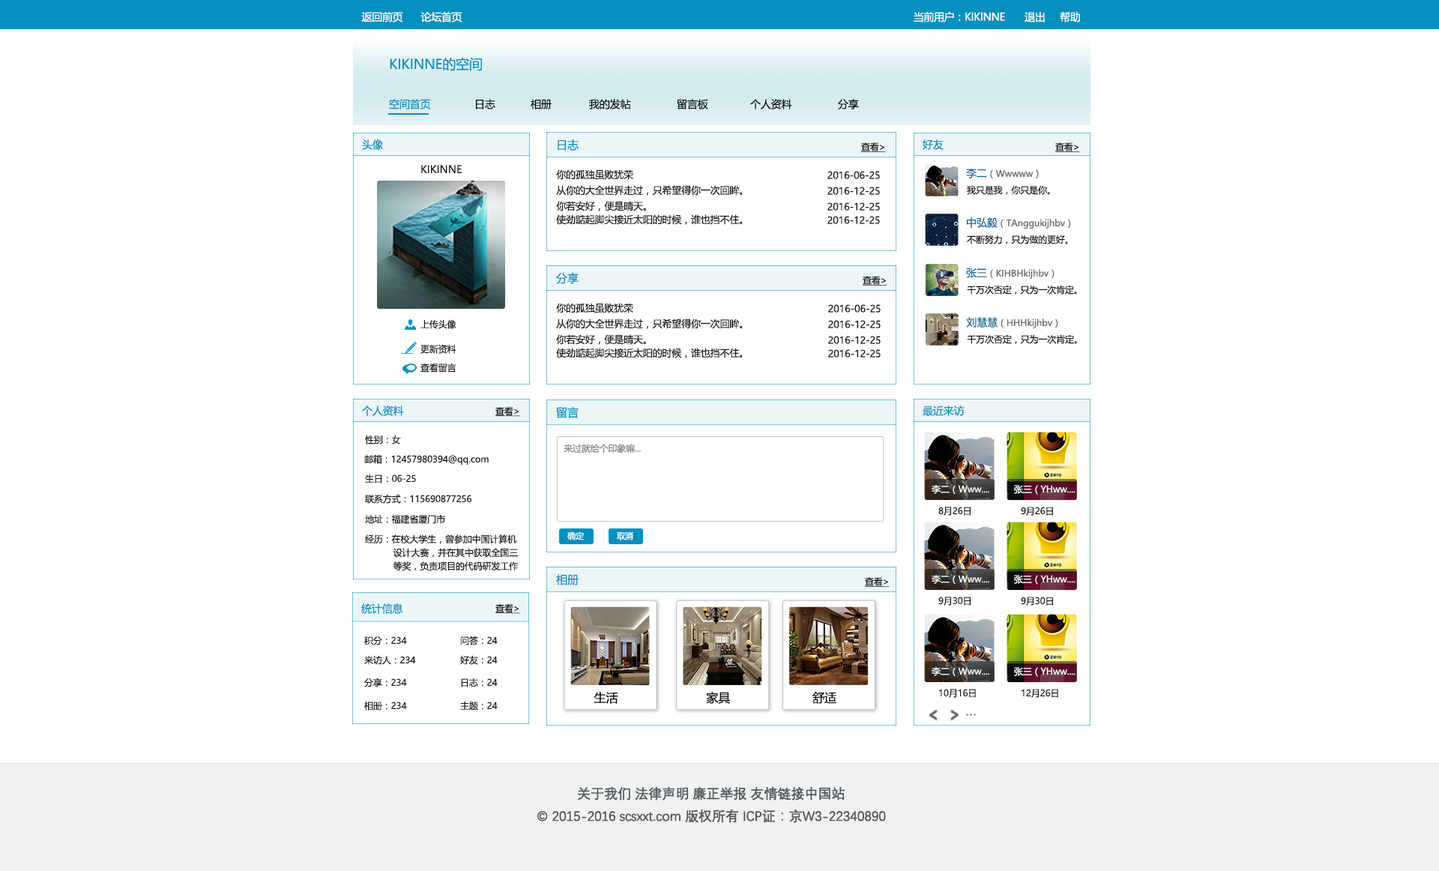
<style>
.page{position:relative;width:1439px;height:871px;background:#ffffff}
.page>*{position:absolute;margin:0}
.t1{font:10.5px "MicrosoftYaHei";letter-spacing:-0.025em;color:#ffffff}
.t2{font:13.5px "MicrosoftYaHei";letter-spacing:-0.01em;color:#0390bf}
.t3{font:10.5px "MicrosoftYaHei";letter-spacing:-0.01em;color:#0390bf}
.t4{font:10.5px "MicrosoftYaHei";letter-spacing:-0.01em;color:#040404}
.t5{font:11.4px "MicrosoftYaHei";letter-spacing:-0.01em;color:#0390bf}
.t6{font:9px "MicrosoftYaHei";letter-spacing:-0.01em;color:#0c0d0e;text-decoration:underline}
.t7{font:10.5px "MicrosoftYaHei";letter-spacing:-0.01em;color:#131616}
.t8{font:9.8px "MicrosoftYaHei";letter-spacing:-0.01em;color:#131616}
.t9{font:9px "MicrosoftYaHei";letter-spacing:-0.01em;color:#656666}
.t10{font:10.5px "MicrosoftYaHei";letter-spacing:-0.01em;color:#056894}
.t11{font:9px "MicrosoftYaHei";letter-spacing:-0.01em;color:#0f0f0f}
.t12{font:9px "MicrosoftYaHei";letter-spacing:-0.01em;color:#131616}
.t13{font:9px "MicrosoftYaHei";letter-spacing:-0.01em;color:#818484}
.t14{font:9px "MicrosoftYaHei";letter-spacing:-0.01em;color:#f4fcfe}
.t15{font:9px "MicrosoftYaHei";letter-spacing:-0.01em;color:#111212}
.t16{font:8.3px "MicrosoftYaHei";letter-spacing:-0.01em;color:#ffffff}
.t17{font:9px/13.5px "MicrosoftYaHei";letter-spacing:-0.01em;color:#131616}
.t18{font:12.1px "MicrosoftYaHei";letter-spacing:-0.01em;color:#040505}
.t19{font:18.4px "MicrosoftYaHei";letter-spacing:-0.01em;color:#616363;scale:0.78 1}
.t20{font:18.2px "MicrosoftYaHei";letter-spacing:-0.01em;color:#616363;scale:0.79 1}
.t21{font:13.5px/22.5px "DengXian-Regular";letter-spacing:-0.025em;color:#545a5c;font-weight:bold}
</style>
<div class="page">
<p class="t1" style="left:361px;top:11px;width:42px;height:11px">返回前页</p>
<p class="t1" style="left:420px;top:11px;width:42px;height:11px">论坛首页</p>
<p class="t1" style="left:913px;top:11px;width:92px;height:11px">当前用户：KIKINNE</p>
<p class="t1" style="left:1024px;top:12px;width:21px;height:10px">退出</p>
<p class="t1" style="left:1060px;top:11px;width:20px;height:11px">帮助</p>
<p class="t2" style="left:390px;top:57px;width:92px;height:14px">KIKINNE的空间</p>
<p class="t3" style="left:389px;top:99px;width:42px;height:10px">空间首页</p>
<p class="t4" style="left:476px;top:99px;width:19px;height:10px">日志</p>
<p class="t4" style="left:531px;top:99px;width:20px;height:10px">相册</p>
<p class="t4" style="left:589px;top:99px;width:42px;height:10px">我的发帖</p>
<p class="t4" style="left:677px;top:99px;width:31px;height:10px">留言板</p>
<p class="t4" style="left:750px;top:99px;width:42px;height:10px">个人资料</p>
<p class="t4" style="left:838px;top:99px;width:21px;height:10px">分享</p>
<p class="t3" style="left:362px;top:139px;width:21px;height:11px">头像</p>
<p class="t5" style="left:557px;top:139px;width:21px;height:12px">日志</p>
<p class="t6" style="left:861px;top:142px;width:25px;height:10px">查看&gt;</p>
<p class="t3" style="left:922px;top:139px;width:21px;height:11px">好友</p>
<p class="t6" style="left:1055px;top:142px;width:25px;height:10px">查看&gt;</p>
<p class="t7" style="left:421px;top:165px;width:41px;height:8px">KIKINNE</p>
<p class="t8" style="left:556px;top:169px;width:77px;height:11px">你的孤独虽败犹荣</p>
<p class="t8" style="left:827px;top:171px;width:53px;height:8px">2016-06-25</p>
<p class="t9" style="left:966px;top:168px;width:73px;height:10px"><span class="t10">李二</span>（Wwwww）</p>
<p class="t8" style="left:556px;top:185px;width:187px;height:11px">从你的大全世界走过，只希望得你一次回眸。</p>
<p class="t11" style="left:967px;top:185px;width:83px;height:10px">我只是我，你只是你。</p>
<p class="t8" style="left:827px;top:187px;width:53px;height:8px">2016-12-25</p>
<p class="t8" style="left:556px;top:201px;width:90px;height:10px">你若安好，便是晴天。</p>
<p class="t8" style="left:827px;top:202px;width:53px;height:9px">2016-12-25</p>
<p class="t8" style="left:556px;top:214px;width:187px;height:11px">使劲踮起脚尖接近太阳的时候，谁也挡不住。</p>
<p class="t8" style="left:827px;top:216px;width:53px;height:8px">2016-12-25</p>
<p class="t9" style="left:967px;top:217px;width:104px;height:12px"><span class="t10">中弘毅</span>（TAnggukijhbv）</p>
<p class="t11" style="left:967px;top:235px;width:101px;height:9px">不断努力，只为做的更好。</p>
<p class="t9" style="left:966px;top:268px;width:88px;height:11px"><span class="t10">张三</span>（KIHBHkijhbv）</p>
<p class="t5" style="left:556px;top:272px;width:22px;height:12px">分享</p>
<p class="t6" style="left:862px;top:276px;width:25px;height:9px">查看&gt;</p>
<p class="t11" style="left:967px;top:285px;width:110px;height:9px">千万次否定，只为一次肯定。</p>
<p class="t8" style="left:556px;top:303px;width:77px;height:10px">你的孤独虽败犹荣</p>
<p class="t8" style="left:828px;top:304px;width:52px;height:8px">2016-06-25</p>
<p class="t9" style="left:966px;top:317px;width:92px;height:11px"><span class="t10">刘慧慧</span>（HHHkijhbv）</p>
<p class="t12" style="left:420px;top:319px;width:36px;height:10px">上传头像</p>
<p class="t8" style="left:556px;top:318px;width:187px;height:11px">从你的大全世界走过，只希望得你一次回眸。</p>
<p class="t8" style="left:828px;top:320px;width:52px;height:8px">2016-12-25</p>
<p class="t8" style="left:556px;top:334px;width:90px;height:11px">你若安好，便是晴天。</p>
<p class="t8" style="left:828px;top:336px;width:52px;height:8px">2016-12-25</p>
<p class="t11" style="left:967px;top:334px;width:110px;height:10px">千万次否定，只为一次肯定。</p>
<p class="t12" style="left:420px;top:344px;width:36px;height:10px">更新资料</p>
<p class="t8" style="left:556px;top:348px;width:187px;height:10px">使劲踮起脚尖接近太阳的时候，谁也挡不住。</p>
<p class="t8" style="left:828px;top:349px;width:52px;height:8px">2016-12-25</p>
<p class="t12" style="left:420px;top:363px;width:36px;height:9px">查看留言</p>
<p class="t3" style="left:362px;top:405px;width:42px;height:11px">个人资料</p>
<p class="t6" style="left:495px;top:406px;width:25px;height:11px">查看&gt;</p>
<p class="t5" style="left:556px;top:406px;width:22px;height:12px">留言</p>
<p class="t3" style="left:922px;top:405px;width:42px;height:11px">最近来访</p>
<p class="t12" style="left:365px;top:435px;width:36px;height:9px">性别：女</p>
<p class="t13" style="left:563px;top:444px;width:78px;height:9px">来过就给个印象嘛...</p>
<p class="t12" style="left:364px;top:454px;width:125px;height:11px">邮箱：12457980394@qq.com</p>
<p class="t12" style="left:365px;top:474px;width:51px;height:9px">生日：06-25</p>
<p class="t14" style="left:931px;top:484px;width:58px;height:10px">李二（Www....</p>
<p class="t14" style="left:1014px;top:485px;width:61px;height:10px">张三（YHww....</p>
<p class="t12" style="left:365px;top:494px;width:107px;height:10px">联系方式：115690877256</p>
<p class="t15" style="left:938px;top:507px;width:32px;height:9px">8月26日</p>
<p class="t15" style="left:1021px;top:507px;width:32px;height:9px">9月26日</p>
<p class="t12" style="left:365px;top:514px;width:80px;height:10px">地址：福建省厦门市</p>
<p class="t16" style="left:567px;top:531px;width:17px;height:9px">确定</p>
<p class="t16" style="left:617px;top:531px;width:16px;height:9px">取消</p>
<p class="t17" style="left:365px;top:534px;width:153px;height:37px">经历：在校大学生，曾参加中国计算机<br>           设计大赛，并在其中获取全国三<br>           等奖，负责项目的代码研发工作。</p>
<p class="t5" style="left:556px;top:574px;width:22px;height:11px">相册</p>
<p class="t6" style="left:865px;top:577px;width:24px;height:10px">查看&gt;</p>
<p class="t14" style="left:931px;top:574px;width:58px;height:10px">李二（Www....</p>
<p class="t14" style="left:1014px;top:575px;width:61px;height:9px">张三（YHww....</p>
<p class="t3" style="left:361px;top:603px;width:42px;height:11px">统计信息</p>
<p class="t6" style="left:495px;top:603px;width:25px;height:11px">查看&gt;</p>
<p class="t15" style="left:938px;top:596px;width:32px;height:9px">9月30日</p>
<p class="t15" style="left:1021px;top:596px;width:32px;height:9px">9月30日</p>
<p class="t12" style="left:364px;top:635px;width:43px;height:10px">积分：234</p>
<p class="t12" style="left:460px;top:635px;width:38px;height:10px">问答：24</p>
<p class="t12" style="left:364px;top:655px;width:52px;height:10px">来访人：234</p>
<p class="t12" style="left:460px;top:655px;width:38px;height:10px">好友：24</p>
<p class="t12" style="left:364px;top:677px;width:43px;height:10px">分享：234</p>
<p class="t12" style="left:461px;top:677px;width:37px;height:10px">日志：24</p>
<p class="t14" style="left:931px;top:666px;width:58px;height:10px">李二（Www....</p>
<p class="t14" style="left:1014px;top:667px;width:61px;height:10px">张三（YHww....</p>
<p class="t15" style="left:939px;top:689px;width:37px;height:9px">10月16日</p>
<p class="t15" style="left:1021px;top:689px;width:37px;height:9px">12月26日</p>
<p class="t12" style="left:364px;top:701px;width:43px;height:9px">相册：234</p>
<p class="t12" style="left:460px;top:701px;width:38px;height:9px">主题：24</p>
<p class="t18" style="left:593px;top:692px;width:25px;height:12px">生活</p>
<p class="t18" style="left:706px;top:691px;width:25px;height:13px">家具</p>
<p class="t18" style="left:812px;top:692px;width:24px;height:12px">舒适</p>
<p class="t19" style="left:929px;top:710px;width:8px;height:10px">&lt;</p>
<p class="t20" style="left:951px;top:710px;width:7px;height:10px;rotate:180deg">&lt;</p>
<p class="t21" style="left:537px;top:786px;width:349px;height:37px;text-align:center">关于我们 法律声明 廉正举报 友情链接中国站<br>© 2015-2016 scsxxt.com 版权所有 ICP证：京W3-22340890</p>
</div>
